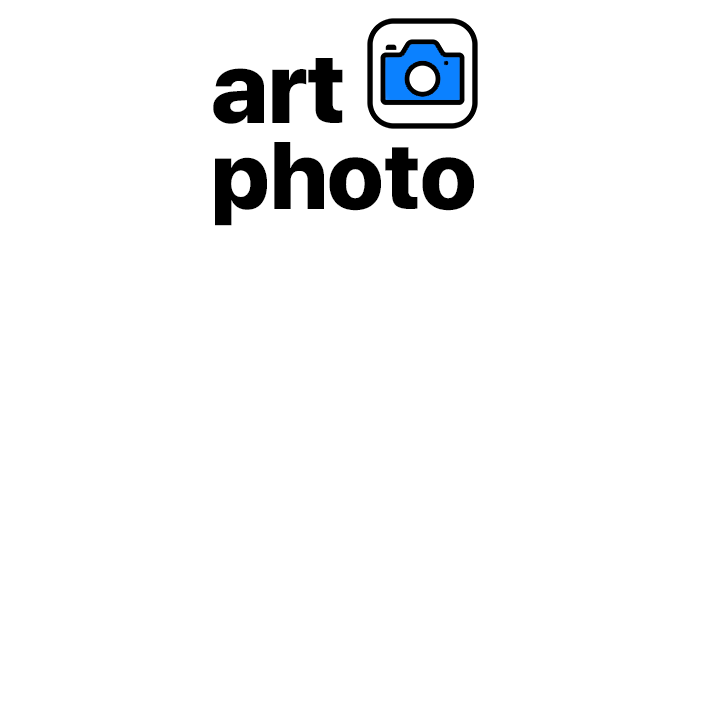
<style>
.page{position:relative;width:720px;height:720px;background:#ffffff}
.page>*{position:absolute;margin:0}
.t1{font:100px "SFProDisplay-Heavy";color:#000000}
.t2{font:95px "SFProDisplay-Heavy";color:#000000}
</style>
<div class="page">
<p class="t1" style="left:213px;top:58px;width:130px;height:66px">art</p>
<p class="t2" style="left:215px;top:142px;width:259px;height:84px">photo</p>
</div>
